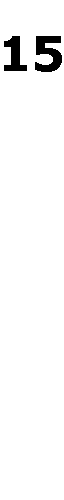
<style>
.page{position:relative;width:64px;height:500px;background:#ffffff}
.page>*{position:absolute;margin:0}
.t1{font:48px "Verdana-Bold";color:#000000}
</style>
<div class="page">
<p class="t1" style="left:4px;top:36px;width:58px;height:36px">15</p>
</div>
